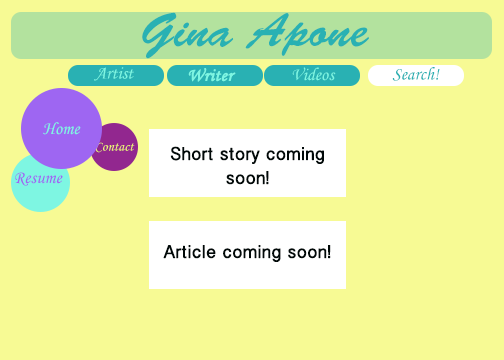
<style>
.page{position:relative;width:504px;height:360px;background:#f7fa94}
.page>*{position:absolute;margin:0}
.t1{font:48px "BrushScriptStd";color:#29b1b3}
.t2{font:18px "MonotypeCorsiva";color:#7ef6e2}
.t3{font:18px "MonotypeCorsiva";color:#7ef6e2;font-weight:bold}
.t4{font:18px "MonotypeCorsiva";color:#29b1b3}
.t5{font:14px "MonotypeCorsiva";color:#eef275}
.t6{font:18px/24px "BanglaSangamMN";color:#010908;font-weight:bold}
.t7{font:18px "MonotypeCorsiva";color:#9e66f2}
.t8{font:18px "BanglaSangamMN";color:#010908;font-weight:bold}
</style>
<div class="page">
<p class="t1" style="left:142px;top:12px;width:227px;height:47px">Gina Apone</p>
<p class="t2" style="left:94px;top:67px;width:40px;height:14px">Artist</p>
<p class="t3" style="left:188px;top:68px;width:48px;height:14px">Writer</p>
<p class="t2" style="left:292px;top:67px;width:44px;height:14px">Videos</p>
<p class="t4" style="left:392px;top:67px;width:48px;height:14px">Search!</p>
<p class="t2" style="left:43px;top:122px;width:38px;height:13px">Home</p>
<p class="t5" style="left:95px;top:142px;width:40px;height:11px">Contact</p>
<p class="t6" style="left:170px;top:146px;width:154px;height:39px;text-align:center">Short story coming soon!</p>
<p class="t7" style="left:15px;top:172px;width:48px;height:14px">Resume</p>
<p class="t8" style="left:163px;top:245px;width:168px;height:17px">Article coming soon!</p>
</div>
